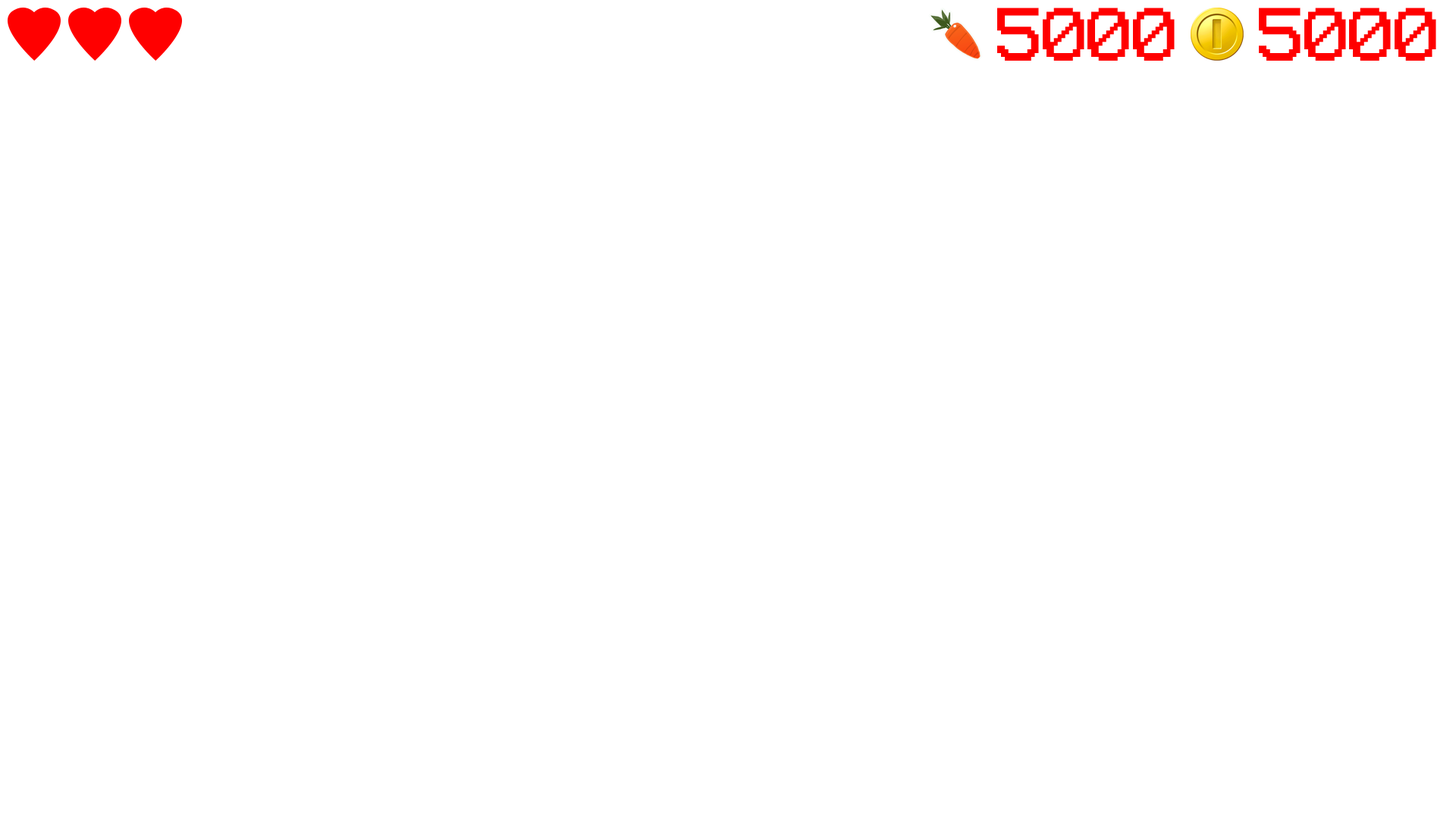
<style>
.page{position:relative;width:1456px;height:819px;background:#ffffff}
.page>*{position:absolute;margin:0}
.t1{font:60.2px "Terminal";color:#ff0000}
</style>
<div class="page">
<p class="t1" style="left:997px;top:8px;width:178px;height:53px">5000</p>
<p class="t1" style="left:1259px;top:8px;width:177px;height:53px">5000</p>
</div>
